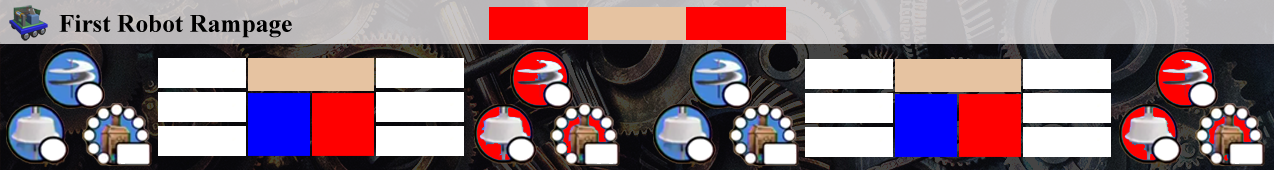
<style>
.page{position:relative;width:1274px;height:170px}
.page>*{position:absolute;margin:0}
.t1{font:25.3px "TimesNewRomanPS-BoldMT";color:#000000}
</style>
<div class="page">
<p class="t1" style="left:59px;top:14px;width:233px;height:24px">First Robot Rampage</p>
</div>
